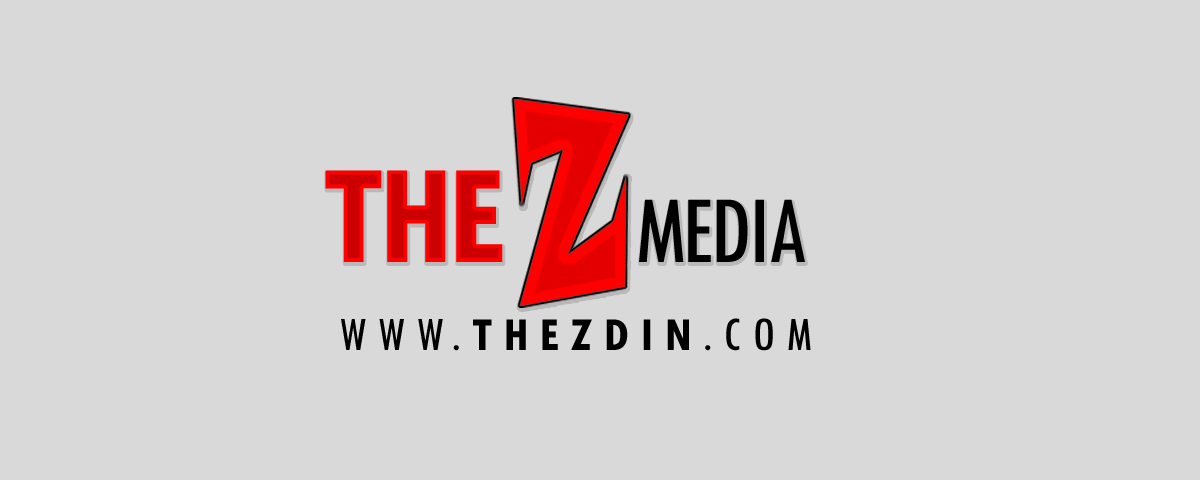
<style>
.page{position:relative;width:1200px;height:480px;background:#d9d9d9}
.page>*{position:absolute;margin:0}
.t1{font:100px "TwCenMT-Condensed";letter-spacing:-0.04em}
.t2{font:150px "TwCenMT-CondensedBold";letter-spacing:-0.04em}
.t3{font:50px "TwCenMT-CondensedBold";letter-spacing:0.22em;color:#000000}
.t4{font:50px "TwCenMT-Condensed";letter-spacing:0.22em;color:#000000}
</style>
<div class="page">
<p class="t1" style="left:325px;top:170px;width:480px;height:92px"><span class="t2">THE     </span>MEDIA</p>
<p class="t3" style="left:341px;top:318px;width:470px;height:33px"><span class="t4">WWW.</span>THEZDIN<span class="t4">.COM</span></p>
</div>
